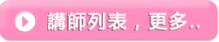
<style>
.page{position:relative;width:219px;height:42px}
.page>*{position:absolute;margin:0}
.t1{font:18px "MicrosoftYaHei";letter-spacing:0.1em;color:#fcfcfc;font-weight:bold}
</style>
<div class="page">
<p class="t1" style="left:47px;top:12px;width:153px;height:19px">講師列表，更多..</p>
</div>
